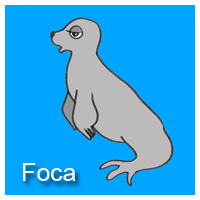
<style>
.page{position:relative;width:200px;height:200px;background:#00a5ff}
.page>*{position:absolute;margin:0}
.t1{font:25px "ArialMT";color:#ffffff}
</style>
<div class="page">
<p class="t1" style="left:23px;top:163px;width:53px;height:18px">Foca</p>
</div>
